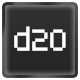
<style>
.page{position:relative;width:80px;height:80px}
.page>*{position:absolute;margin:0}
.t1{font:48px "Kenney-Pixel";color:#ffffff}
</style>
<div class="page">
<p class="t1" style="left:14px;top:26px;width:52px;height:25px">d20</p>
</div>
